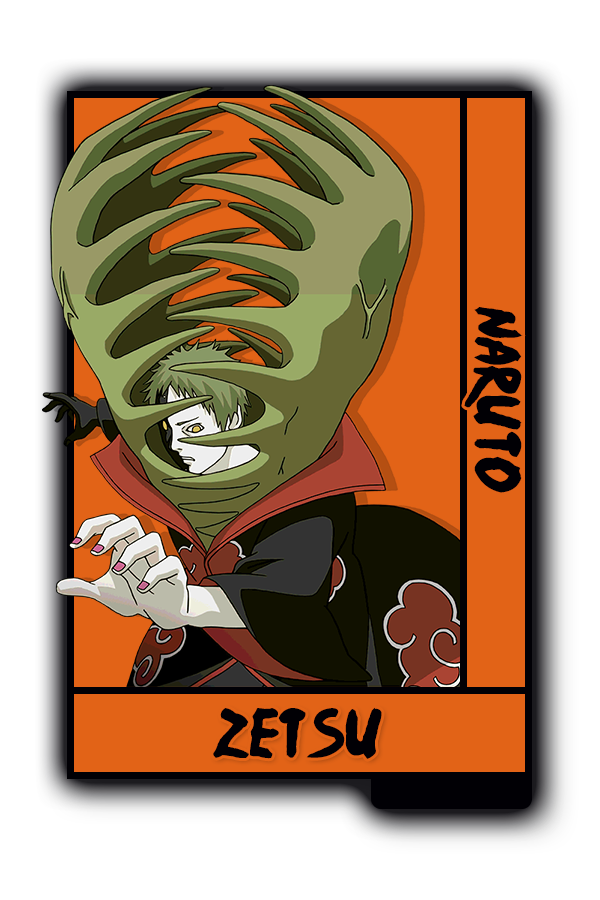
<style>
.page{position:relative;width:600px;height:900px;background:#ffffff}
.page>*{position:absolute;margin:0}
.t1{font:52px "Ninja-Naruto";color:#010005}
.t2{font:55.4px "Ninja-Naruto";color:#010005}
</style>
<div class="page">
<p class="t1" style="left:464px;top:307px;width:59px;height:186px;rotate:90deg">Naruto</p>
<p class="t2" style="left:213px;top:707px;width:169px;height:52px">Zetsu</p>
</div>
